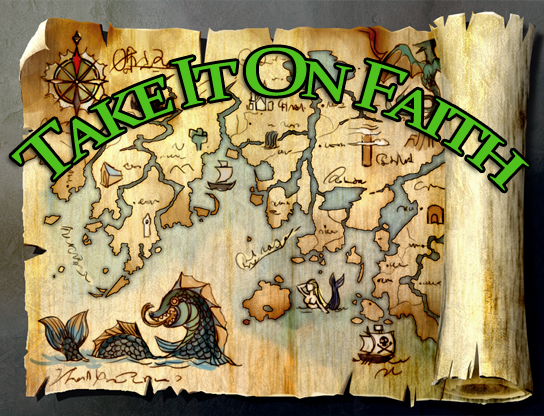
<style>
.page{position:relative;width:544px;height:416px}
.page>*{position:absolute;margin:0}
.t1{font:68px "Constantia";letter-spacing:-0.1em;color:#50c21e;font-variant:small-caps}
</style>
<div class="page">
<p class="t1" style="left:11px;top:47px;width:518px;height:144px">Take It On Faith</p>
</div>
